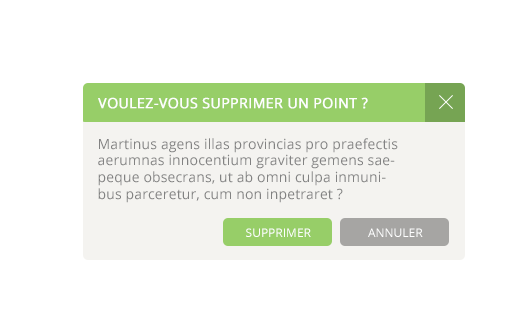
<style>
.page{position:relative;width:523px;height:316px;background:#ffffff}
.page>*{position:absolute;margin:0}
.t1{font:14px "OpenSans";letter-spacing:0.01em;color:#fefefe;text-transform:uppercase;font-weight:bold}
.t2{font:14px "OpenSans";letter-spacing:0.01em;color:#828282}
.t3{font:12px "OpenSans";color:#ffffff;text-transform:uppercase}
</style>
<div class="page">
<p class="t1" style="left:98px;top:97px;width:270px;height:12px">Voulez-vous SUpprimer un point ?</p>
<p class="t2" style="left:98px;top:138px;width:300px;height:65px">Martinus agens illas provincias pro praefectis aerumnas innocentium graviter gemens saepeque obsecrans, ut ab omni culpa inmunibus parceretur, cum non inpetraret ?</p>
<p class="t3" style="left:246px;top:228px;width:65px;height:9px">Supprimer</p>
<p class="t3" style="left:368px;top:228px;width:55px;height:9px">Annuler</p>
</div>
